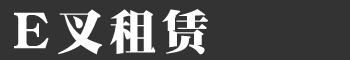
<style>
.page{position:relative;width:350px;height:60px;background:#333333}
.page>*{position:absolute;margin:0}
.t1{font:48px "DFPSongW12";letter-spacing:0.1em;color:#ffffff}
.t2{font:55px "DFPSongW12";letter-spacing:0.1em;color:#ffffff}
</style>
<div class="page">
<p class="t1" style="left:14px;top:9px;width:194px;height:46px"><span class="t2">E</span>叉租赁</p>
</div>
